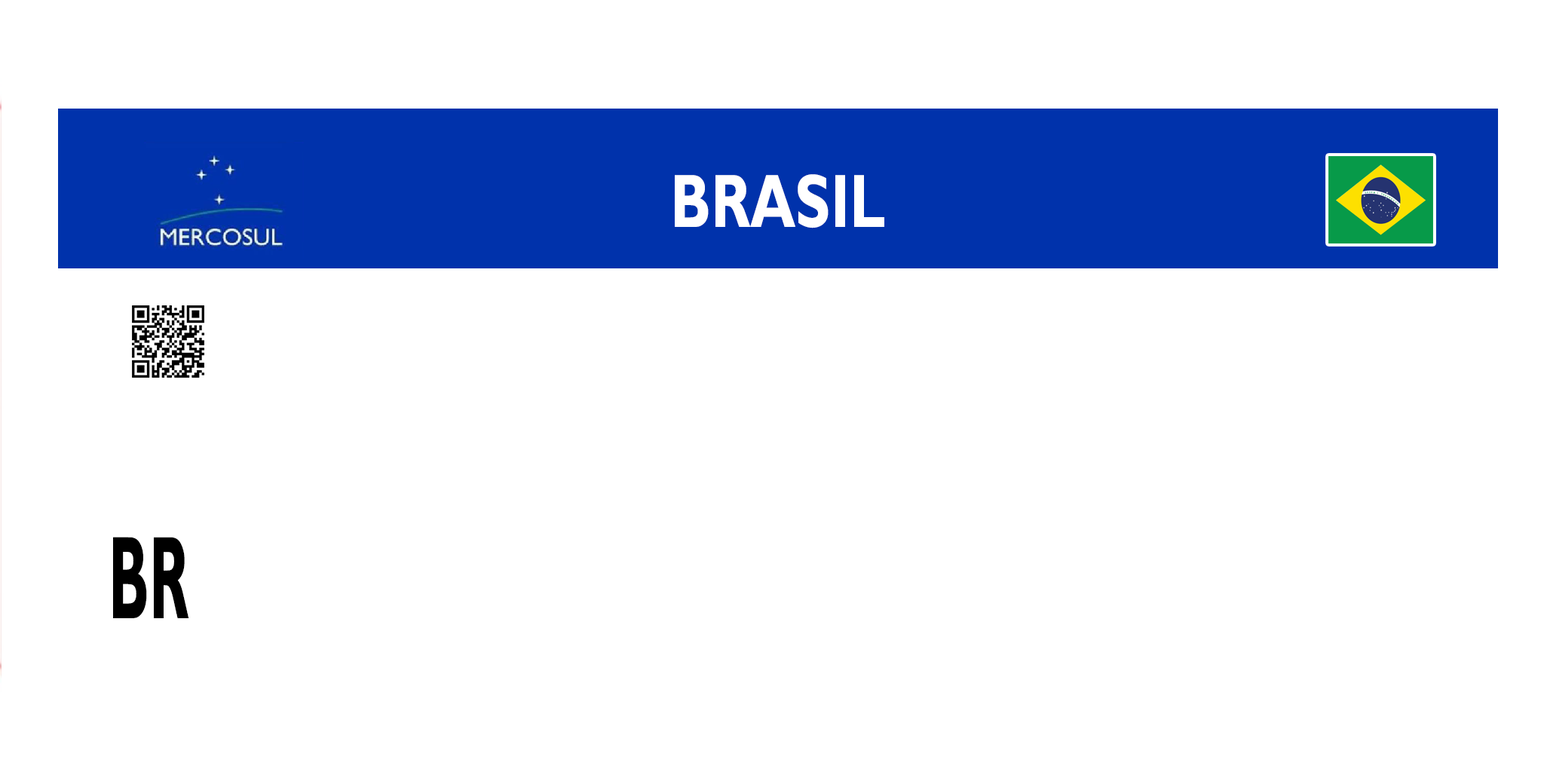
<style>
.page{position:relative;width:1544px;height:772px;background:#ffffff}
.page>*{position:absolute;margin:0}
.t1{font:76px "GillSans-Bold";color:#ffffff;scale:0.76 1}
.t2{font:118.6px "GillSans-Bold";color:#000000;scale:0.49 1}
</style>
<div class="page">
<p class="t1" style="left:675px;top:174px;width:210px;height:54px">BRASIL</p>
<p class="t2" style="left:113px;top:537px;width:76px;height:81px">BR</p>
</div>
